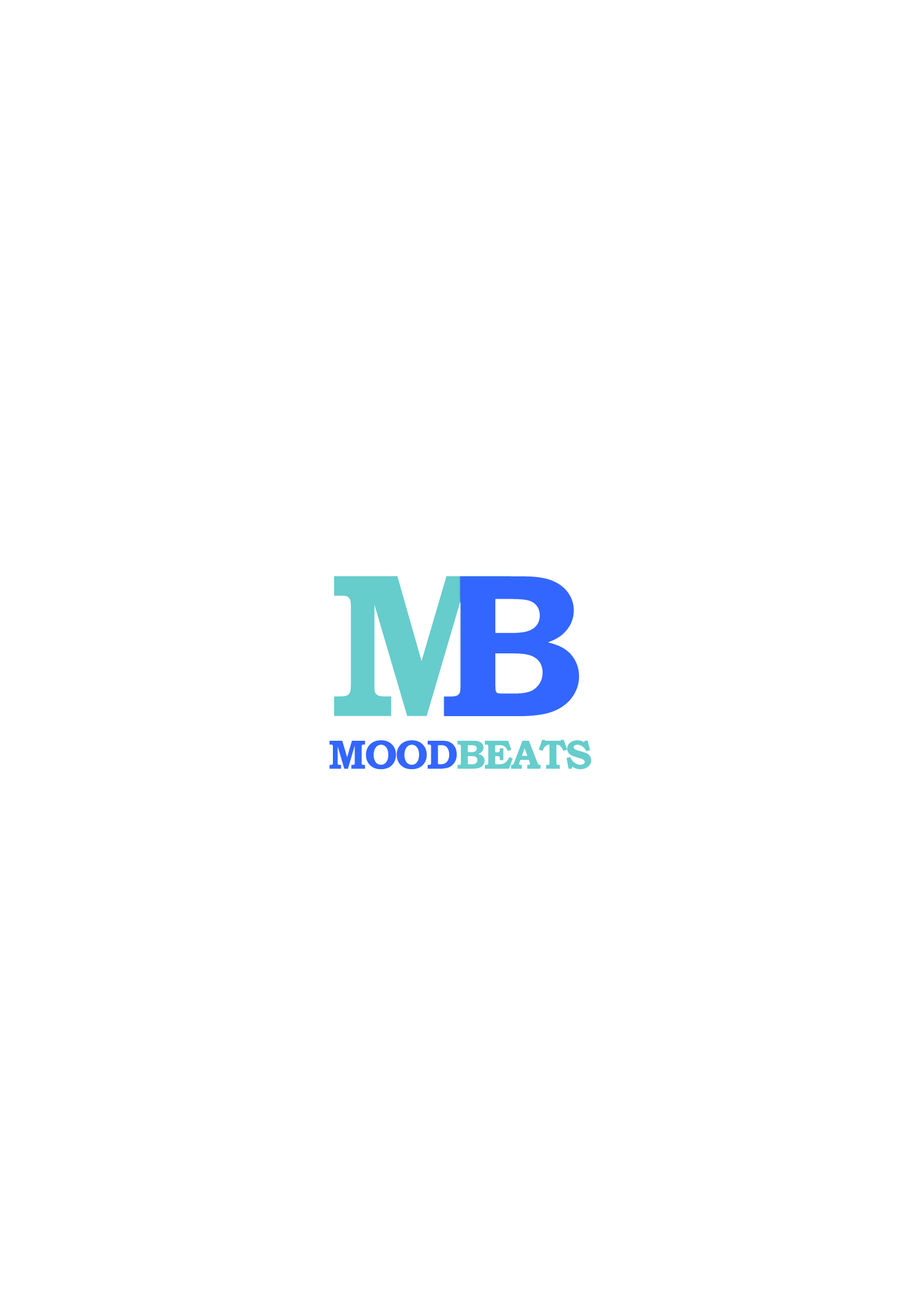
<style>
.page{position:relative;width:923px;height:1292px;background:#ffffff}
.page>*{position:absolute;margin:0}
.t1{font:205.1px "BookmanOldStyle-Bold";letter-spacing:-0.05em;color:#66cccc}
.t2{font:41px "BookmanOldStyle-Bold";letter-spacing:-0.05em;color:#66cccc}
.t3{font:41px "BookmanOldStyle-Bold";letter-spacing:-0.05em;color:#3366ff}
</style>
<div class="page">
<p class="t1" style="left:334px;top:576px;width:177px;height:140px">M</p>
<p class="t2" style="left:329px;top:740px;width:262px;height:30px"><span class="t3">MOOD</span>BEATS</p>
</div>
